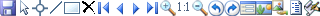
<style>
.page{position:relative;width:320px;height:16px;background:#ffffff}
.page>*{position:absolute;margin:0}
.t1{font:12px "TimesNewRomanPSMT";color:#4d6280}
</style>
<div class="page">
<p class="t1" style="left:178px;top:2px;width:11px;height:9px">1:1</p>
</div>
